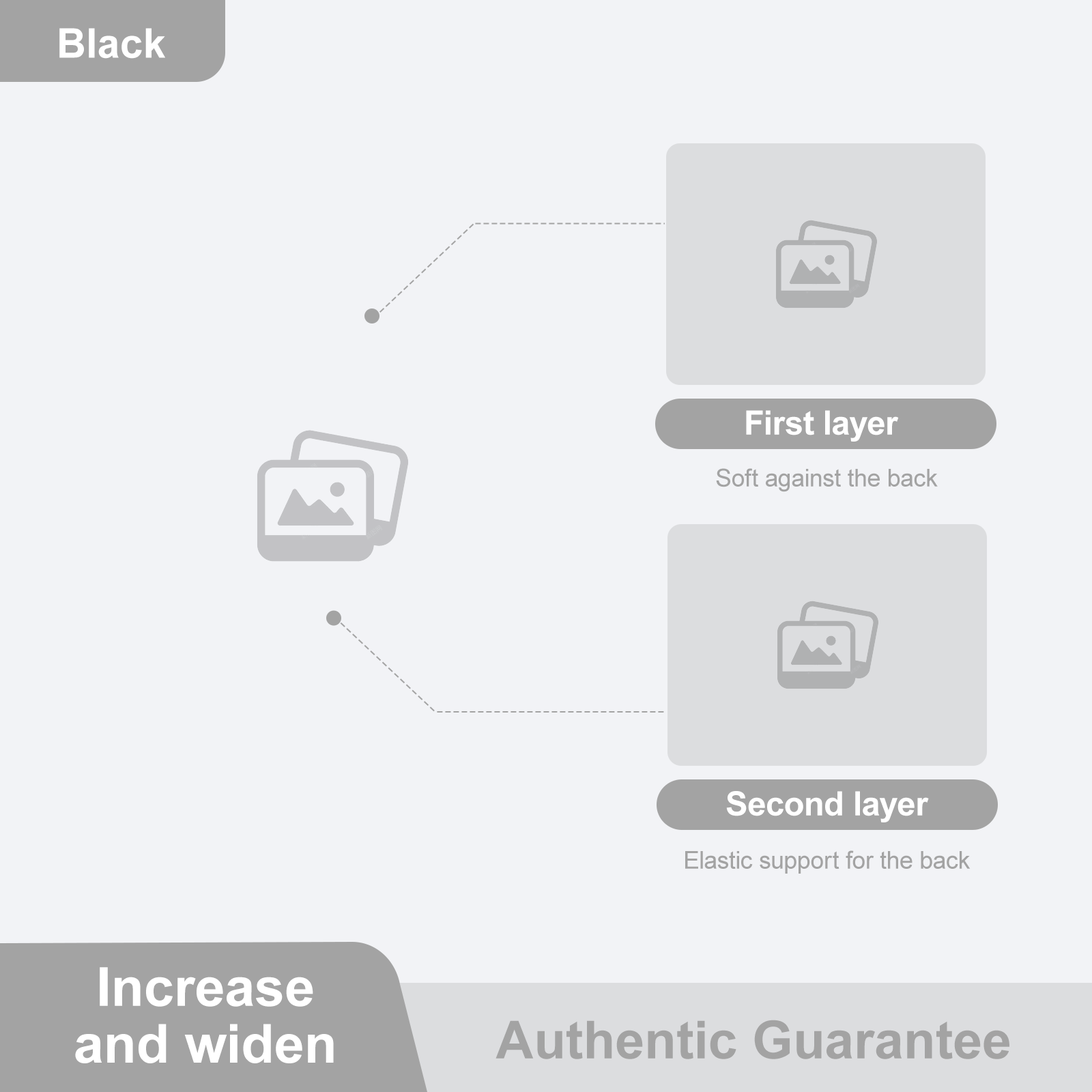
<style>
.page{position:relative;width:1092px;height:1092px;background:#f2f3f6}
.page>*{position:absolute;margin:0}
.t1{font:40.9px "Arial-BoldMT";color:#ffffff}
.t2{font:33.5px "Arial-BoldMT";letter-spacing:-0.01em;color:#ffffff}
.t3{font:24.6px "ArialMT";letter-spacing:-0.01em;color:#a3a3a3}
.t4{font:53.9px/56.8px "Arial-BoldMT";color:#ffffff}
.t5{font:52.4px "Arial-BoldMT";color:#a3a3a3}
</style>
<div class="page">
<p class="t1" style="left:59px;top:28px;width:106px;height:31px">Black</p>
<p class="t2" style="left:746px;top:410px;width:153px;height:32px">First layer</p>
<p class="t3" style="left:716px;top:468px;width:222px;height:24px">Soft against the back</p>
<p class="t2" style="left:726px;top:791px;width:203px;height:31px">Second layer</p>
<p class="t3" style="left:685px;top:850px;width:286px;height:24px">Elastic support for the back</p>
<p class="t4" style="left:75px;top:967px;width:259px;height:96px;text-align:center">Increase<br>and widen</p>
<p class="t5" style="left:495px;top:1020px;width:514px;height:39px">Authentic Guarantee</p>
</div>
